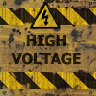
<style>
.page{position:relative;width:96px;height:96px}
.page>*{position:absolute;margin:0}
.t1{font:14.9px/18px "Tahoma-Bold";color:#231b0b}
</style>
<div class="page">
<p class="t1" style="left:11px;top:34px;width:70px;height:31px;text-align:center">HIGH<br>VOLTAGE</p>
</div>
